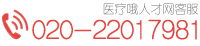
<style>
.page{position:relative;width:200px;height:46px;background:#ffffff}
.page>*{position:absolute;margin:0}
.t1{font:12px "HYe1gj";color:#747474}
.t2{font:26.8px "HYe1gj";letter-spacing:-0.025em;color:#e5463f;font-weight:bold}
</style>
<div class="page">
<p class="t1" style="left:103px;top:3px;width:95px;height:12px">医疗哦人才网客服</p>
<p class="t2" style="left:32px;top:19px;width:165px;height:21px">020-22017981</p>
</div>
